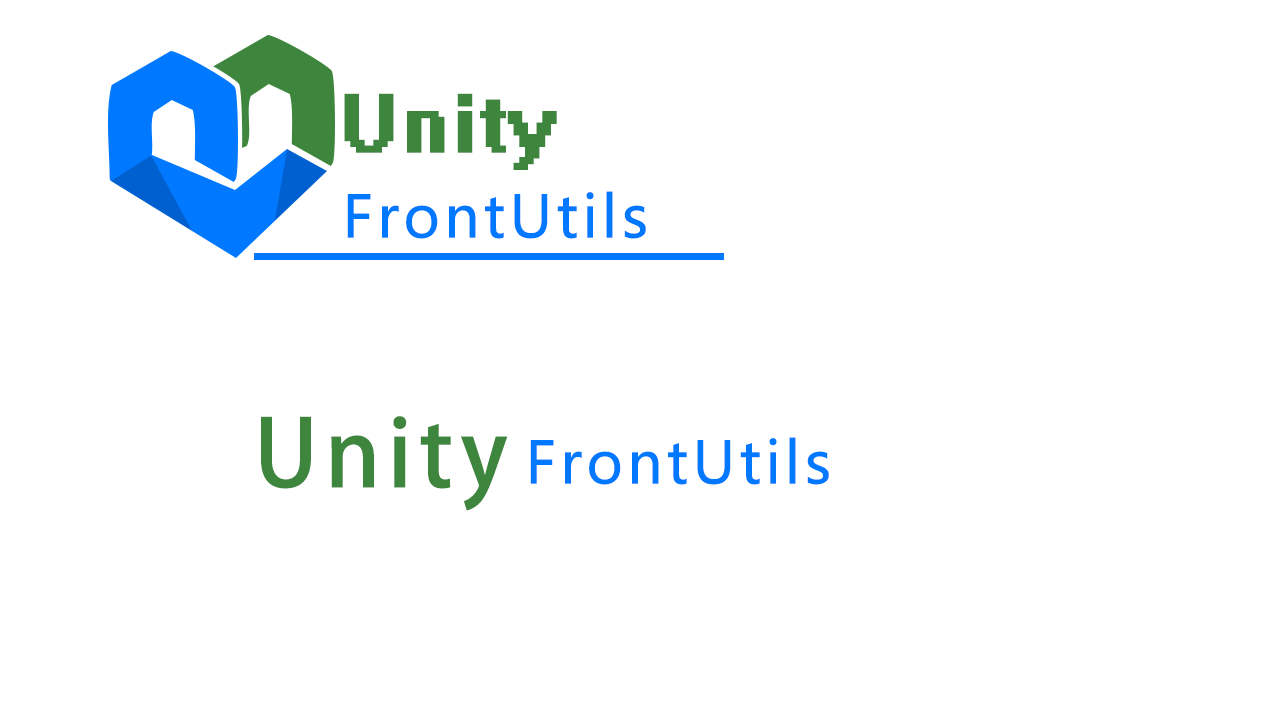
<style>
.page{position:relative;width:1280px;height:720px;background:#ffffff}
.page>*{position:absolute;margin:0}
.t1{font:92.2px "System";letter-spacing:0.05em;color:#3e863d;font-weight:bold}
.t2{font:57.2px "MicrosoftYaHei";letter-spacing:0.05em;color:#0078ff;font-weight:bold}
.t3{font:92.2px "AdobeHeitiStd-Regular";letter-spacing:0.05em;color:#3e863d;font-weight:bold}
</style>
<div class="page">
<p class="t1" style="left:344px;top:93px;width:213px;height:77px">Unity</p>
<p class="t2" style="left:347px;top:191px;width:299px;height:48px">FrontUtils</p>
<p class="t3" style="left:261px;top:416px;width:247px;height:95px">Unity</p>
<p class="t2" style="left:530px;top:437px;width:299px;height:48px">FrontUtils</p>
</div>
